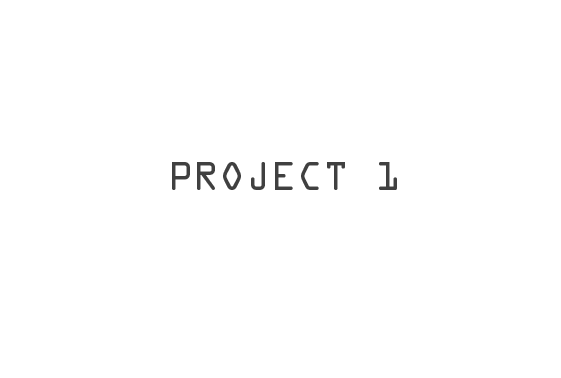
<style>
.page{position:relative;width:561px;height:378px;background:#ffffff}
.page>*{position:absolute;margin:0}
.t1{font:36px "OCRAStd";color:#404040;text-transform:uppercase}
</style>
<div class="page">
<p class="t1" style="left:172px;top:162px;width:225px;height:28px">Project 1</p>
</div>
